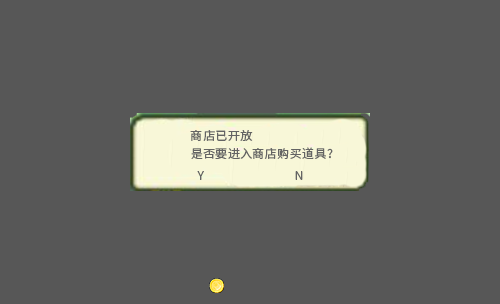
<style>
.page{position:relative;width:500px;height:304px;background:#575757}
.page>*{position:absolute;margin:0}
.t1{font:12px/18px "SourceHanSansCN-Regular";letter-spacing:0.03em;color:#646464}
.t2{font:12px "SourceHanSansCN-Regular";letter-spacing:0.03em;color:#646464}
</style>
<div class="page">
<p class="t1" style="left:190px;top:130px;width:143px;height:29px">商店已开放<br>是否要进入商店购买道具？</p>
<p class="t2" style="left:197px;top:171px;width:7px;height:9px">Y</p>
<p class="t2" style="left:295px;top:171px;width:8px;height:9px">N</p>
</div>
